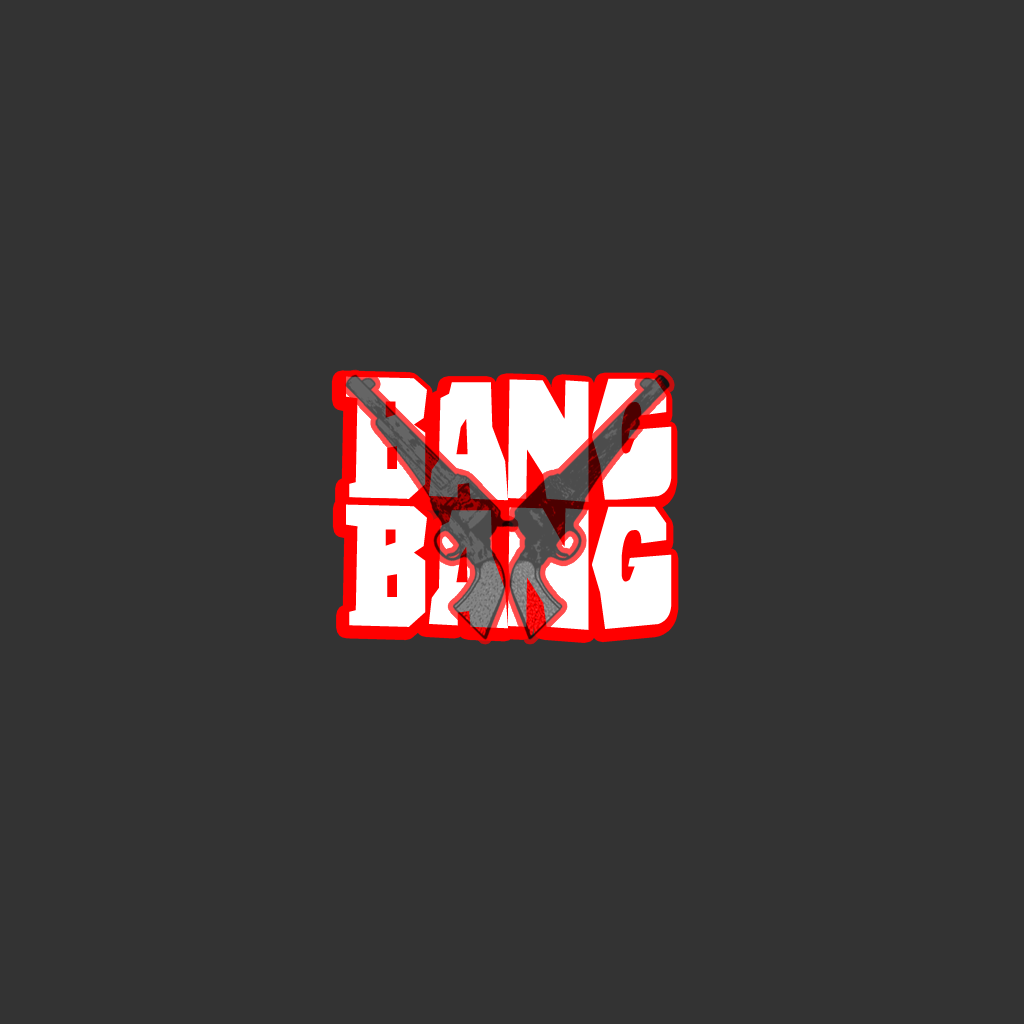
<style>
.page{position:relative;width:1024px;height:1024px;background:#333333}
.page>*{position:absolute;margin:0}
.t1{font:150px "Eastwood";color:#ffffff}
</style>
<div class="page">
<p class="t1" style="left:346px;top:376px;width:326px;height:126px">BANG</p>
<p class="t1" style="left:346px;top:504px;width:326px;height:126px">BANG</p>
</div>
